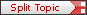
<style>
.page{position:relative;width:87px;height:15px}
.page>*{position:absolute;margin:0}
.t1{font:8.6px "Tahoma";letter-spacing:0.025em;color:#cd0000;scale:1.16 1}
</style>
<div class="page">
<p class="t1" style="left:11px;top:3px;width:48px;height:10px">Split Topic</p>
</div>
